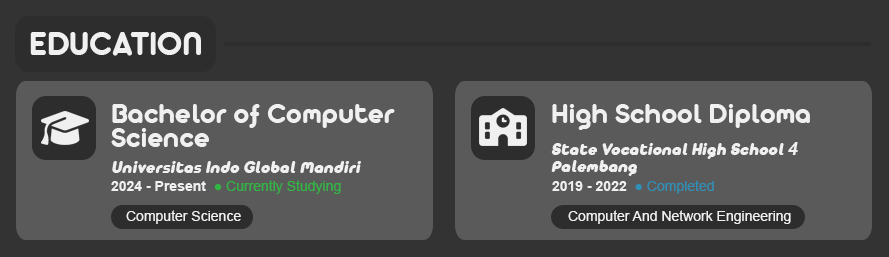
<style>
.page{position:relative;width:889px;height:257px;background:#5a5a5a}
.page>*{position:absolute;margin:0}
.t1{font:36px "AristaProAlternate-Bold";color:#f0f0f0}
.t2{font:30px/24px "AristaProAlternate-Bold";color:#f0f0f0}
.t3{font:30px "AristaProAlternate-Bold";color:#f0f0f0}
.t4{font:18px/17px "AristaProAlternate-Fat";color:#f0f0f0;font-style:italic}
.t5{font:18px/17px "Arial-BoldMT";color:#f0f0f0;font-style:italic}
.t6{font:18px "AristaProAlternate-Fat";color:#f0f0f0;font-style:italic}
.t7{font:14px "ArialMT";color:#30b643}
.t8{font:14px "Arial-BoldMT";color:#f0f0f0}
.t9{font:14px "ArialMT";color:#308fb6}
.t10{font:14px "ArialMT";color:#f0f0f0}
</style>
<div class="page">
<p class="t1" style="left:30px;top:32px;width:171px;height:24px">EDUCATION</p>
<p class="t2" style="left:111px;top:104px;width:284px;height:43px">Bachelor of Computer<br>Science</p>
<p class="t3" style="left:552px;top:104px;width:258px;height:26px">High School Diploma</p>
<p class="t4" style="left:551px;top:142px;width:247px;height:34px">State Vocational High School <span class="t5">4</span><br>Palembang</p>
<p class="t6" style="left:112px;top:161px;width:249px;height:12px">Universitas Indo Global Mandiri</p>
<p class="t7" style="left:111px;top:180px;width:230px;height:14px"><span class="t8">2024 - Present  </span>● Currently Studying</p>
<p class="t8" style="left:552px;top:180px;width:162px;height:14px">2019 - 2022  <span class="t9">● Completed</span></p>
<p class="t10" style="left:126px;top:210px;width:115px;height:14px">Computer Science</p>
<p class="t10" style="left:568px;top:210px;width:223px;height:14px">Computer And Network Engineering</p>
</div>
